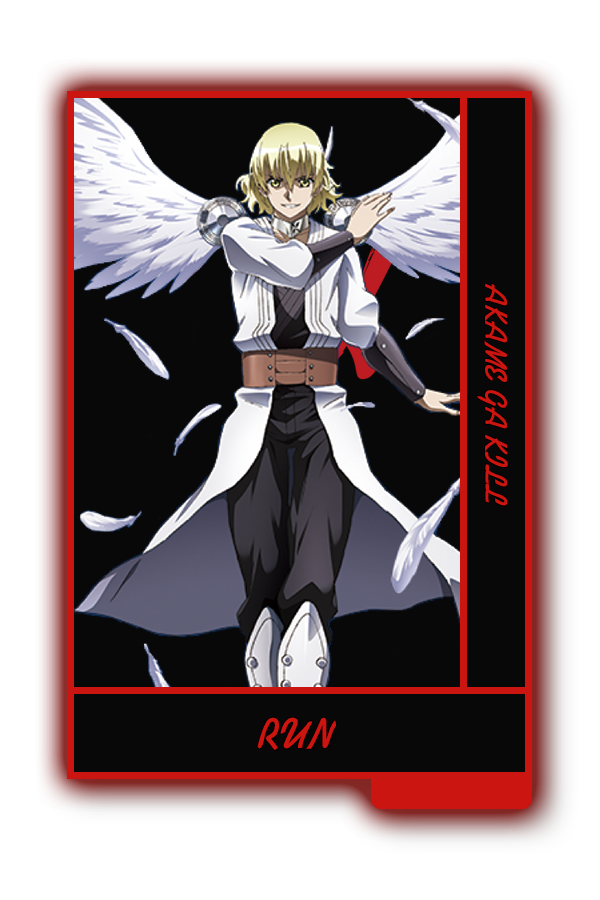
<style>
.page{position:relative;width:600px;height:900px;background:#080808}
.page>*{position:absolute;margin:0}
.t1{font:31.2px "Alako-Bold";color:#cb1511}
.t2{font:43.2px "Alako-Bold";color:#cb1511}
</style>
<div class="page">
<p class="t1" style="left:477px;top:283px;width:31px;height:223px;rotate:90deg">AKAME GA KILL</p>
<p class="t2" style="left:257px;top:717px;width:79px;height:33px">RUN</p>
</div>
